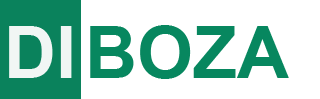
<style>
.page{position:relative;width:320px;height:99px;background:#ffffff}
.page>*{position:absolute;margin:0}
.t1{font:72px "Arial-BoldMT";color:#f1f6f4}
.t2{font:72px "Arial-BoldMT";color:#07875f}
</style>
<div class="page">
<p class="t1" style="left:9px;top:26px;width:63px;height:52px">DI</p>
<p class="t2" style="left:90px;top:25px;width:199px;height:54px">BOZA</p>
</div>
